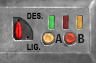
<style>
.page{position:relative;width:96px;height:63px}
.page>*{position:absolute;margin:0}
.t1{font:8.4px "Arial-BoldMT";letter-spacing:0.02em;color:#000000;text-transform:uppercase;scale:0.77 1}
</style>
<div class="page">
<p class="t1" style="left:27px;top:12px;width:16px;height:7px">des.</p>
<p class="t1" style="left:27px;top:43px;width:14px;height:7px">lig.</p>
</div>
